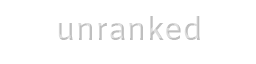
<style>
.page{position:relative;width:256px;height:64px;background:#ffffff}
.page>*{position:absolute;margin:0}
.t1{font:31.2px "Amiko-Regular"}
</style>
<div class="page">
<p class="t1" style="left:58px;top:16px;width:142px;height:24px">unranked</p>
</div>
